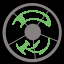
<style>
.page{position:relative;width:64px;height:64px;background:#000000}
.page>*{position:absolute;margin:0}
.t1{font:14px "Sylfaen";color:#74bc6a}
.t2{font:16px "Sylfaen";color:#74bc6a}
</style>
<div class="page">
<p class="t1" style="left:12px;top:10px;width:39px;height:18px">D</p>
<p class="t2" style="left:16px;top:38px;width:34px;height:17px">K</p>
</div>
